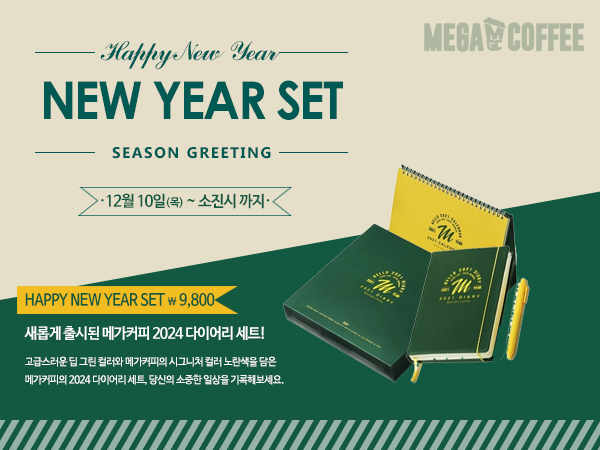
<style>
.page{position:relative;width:600px;height:450px;background:#e5dfc9}
.page>*{position:absolute;margin:0}
.t1{font:30.6px "CommercialScriptBT-Regular";letter-spacing:-0.05em;color:#005953;scale:0.94 1}
.t2{font:52.3px "CenturyGothic-Bold";letter-spacing:-0.05em;color:#005953;scale:0.95 1}
.t3{font:15.4px "Ebrima-Bold";letter-spacing:0.1em;color:#005953}
.t4{font:15.4px "NanumBarunGothicBold";letter-spacing:-0.05em;color:#135941}
.t5{font:11.3px "NanumBarunGothicBold";letter-spacing:-0.05em;color:#135941}
.t6{font:10.5px/17.9px "NanumBarunGothicBold";letter-spacing:-0.05em;color:#ffffff;scale:0.96 1}
.t7{font:16.4px "NanumBarunGothicBold";letter-spacing:-0.03em;color:#135941;scale:0.87 1}
.t8{font:10.9px "NanumBarunGothicBold";letter-spacing:-0.03em;color:#135941;scale:0.87 1}
.t9{font:14.9px/32.8px "NanumBarunGothicBold";letter-spacing:-0.05em;color:#ffffff;scale:0.96 1}
.t10{font:10.5px/26.8px "NanumBarunGothicBold";letter-spacing:-0.05em;color:#ffffff;scale:0.96 1}
</style>
<div class="page">
<p class="t1" style="left:100px;top:41px;width:181px;height:29px">Happy New  Year</p>
<p class="t2" style="left:44px;top:80px;width:299px;height:40px">NEW YEAR SET</p>
<p class="t3" style="left:112px;top:147px;width:159px;height:12px">SEASON GREETING</p>
<p class="t4" style="left:101px;top:193px;width:169px;height:16px">·12월 10일<span class="t5">(목)</span> ~ 소진시 까지·</p>
<p class="t6" style="left:24px;top:293px;width:260px;height:92px"><span class="t7">HAPPY NEW YEAR SET </span><span class="t8">\</span><span class="t7"> 9,800<br></span><span class="t9">새롭게 출시된 메가커피 2024 다이어리 세트!<br></span><span class="t10">고급스러운 딥 그린 컬러와 메가커피의 시그니처 컬러 노란색을 담은<br></span>메가커피의 2024 다이어리 세트, 당신의 소중한 일상을 기록해보세요.</p>
</div>
